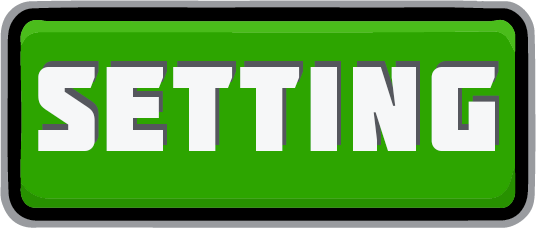
<style>
.page{position:relative;width:536px;height:228px;background:#2da500}
.page>*{position:absolute;margin:0}
.t1{font:120px "Molot";letter-spacing:0.05em;color:#f6f7f8}
</style>
<div class="page">
<p class="t1" style="left:42px;top:61px;width:457px;height:84px">setting</p>
<p class="t1" style="left:38px;top:67px;width:457px;height:84px">setting</p>
</div>
